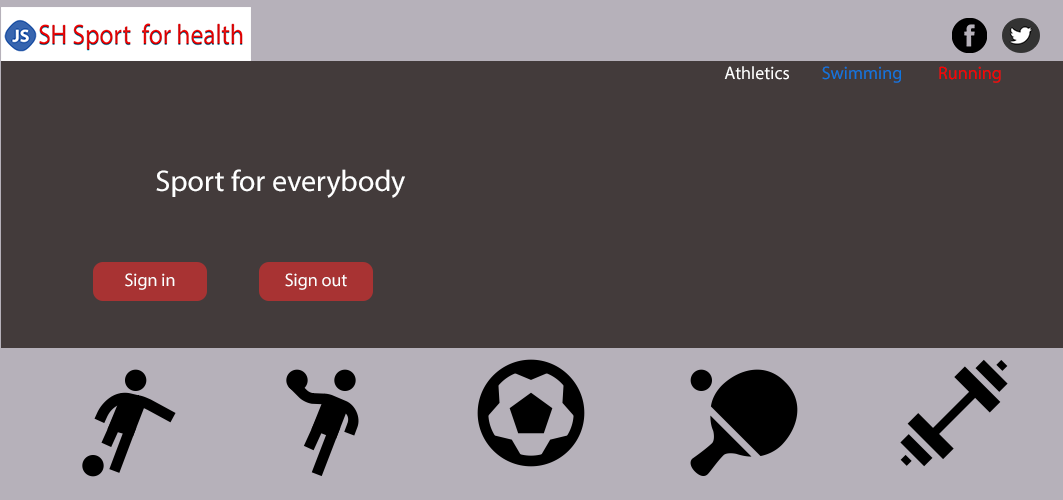
<style>
.page{position:relative;width:1063px;height:500px;background:#433b3b}
.page>*{position:absolute;margin:0}
.t1{font:18px "MyriadPro-Regular";color:#ffffff}
.t2{font:18px "MyriadPro-Regular";color:#0f76e0}
.t3{font:18px "MyriadPro-Regular";color:#ff0000}
.t4{font:30px "MyriadPro-Regular";color:#ffffff}
</style>
<div class="page">
<p class="t1" style="left:724px;top:66px;width:65px;height:14px">Athletics</p>
<p class="t2" style="left:822px;top:66px;width:79px;height:17px">Swimming</p>
<p class="t3" style="left:939px;top:66px;width:62px;height:17px">Running</p>
<p class="t4" style="left:156px;top:169px;width:249px;height:29px">Sport for everybody</p>
<p class="t1" style="left:125px;top:273px;width:50px;height:17px">Sign in</p>
<p class="t1" style="left:285px;top:273px;width:62px;height:17px">Sign out</p>
</div>
